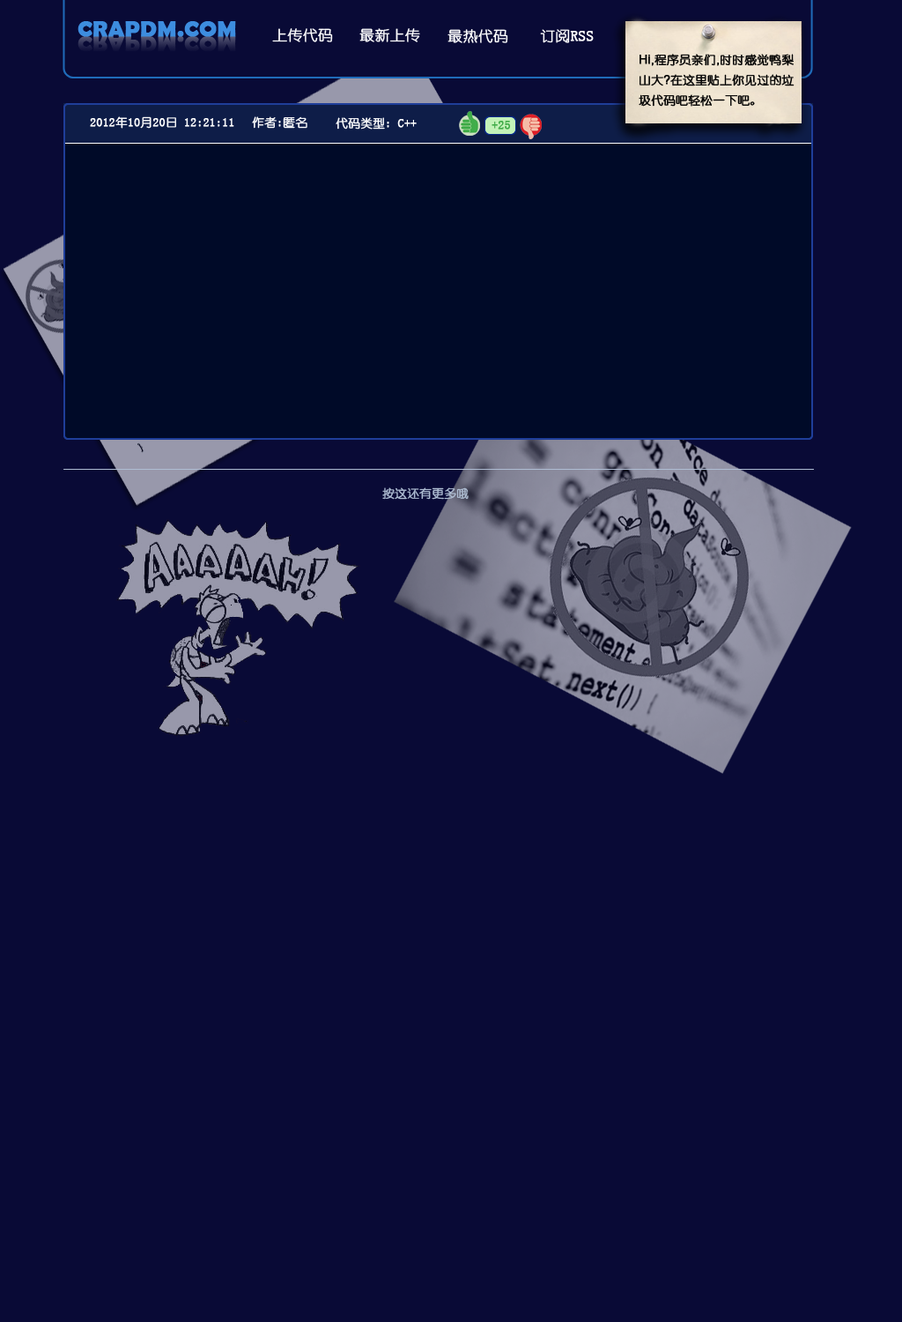
<style>
.page{position:relative;width:902px;height:1322px;background:#090a36}
.page>*{position:absolute;margin:0}
.t1{font:14.1px "YouYuan";color:#ffffff;font-weight:bold;scale:1.05 1}
.t2{font:11.5px "YouYuan";color:#000000;font-weight:bold;scale:1.05 1}
.t3{font:11.5px "ArialMT";color:#000000;font-weight:bold;scale:1.05 1}
.t4{font:11.5px "YouYuan";color:#ffffff;font-weight:bold;scale:1.05 1}
.t5{font:11.5px "YouYuan";color:#41ac49;font-weight:bold;scale:1.05 1}
.t6{font:11.5px "YouYuan";color:#afbed3;font-weight:bold;scale:1.05 1}
</style>
<div class="page">
<p class="t1" style="left:272px;top:28px;width:61px;height:14px">上传代码</p>
<p class="t1" style="left:359px;top:28px;width:61px;height:14px">最新上传</p>
<p class="t1" style="left:448px;top:29px;width:60px;height:14px">最热代码</p>
<p class="t1" style="left:540px;top:29px;width:54px;height:14px">订阅RSS</p>
<p class="t2" style="left:639px;top:54px;width:156px;height:53px"><span class="t3">Hi,</span>程序员亲们<span class="t3">,</span>时时感觉鸭梨山大<span class="t3">?</span>在这里贴上你见过的垃圾代码吧轻松一下吧。</p>
<p class="t4" style="left:90px;top:116px;width:144px;height:13px">2012年10月20日 12:21:11</p>
<p class="t4" style="left:252px;top:116px;width:56px;height:13px">作者:匿名</p>
<p class="t4" style="left:336px;top:117px;width:81px;height:13px">代码类型: C++</p>
<p class="t5" style="left:492px;top:121px;width:18px;height:9px">+25</p>
<p class="t6" style="left:382px;top:487px;width:87px;height:13px">按这还有更多哦</p>
</div>
